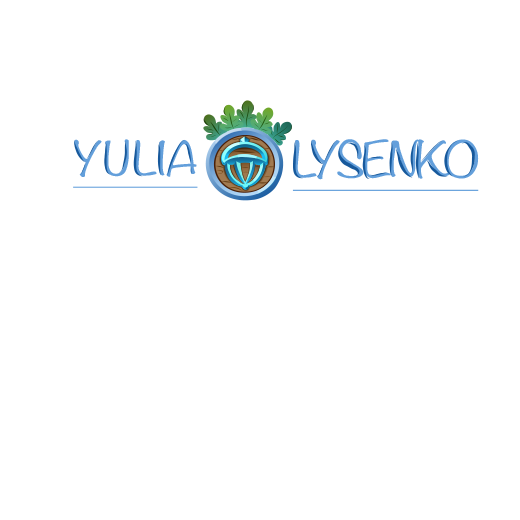
<style>
.page{position:relative;width:520px;height:520px;background:#ffffff}
.page>*{position:absolute;margin:0}
.t1{font:41.4px "Noteworthy-Light";color:#639fdb;font-variant:small-caps;text-decoration:underline;scale:1.18 1}
.t2{font:43.9px "Noteworthy-Light";letter-spacing:-0.049em;color:#639fdb;text-decoration:underline;scale:1.16 1}
</style>
<div class="page">
<p class="t1" style="left:73px;top:139px;width:125px;height:49px">YULIA</p>
<p class="t2" style="left:292px;top:139px;width:187px;height:52px">LYSENKO</p>
</div>
